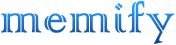
<style>
.page{position:relative;width:176px;height:45px;background:#ffffff}
.page>*{position:absolute;margin:0}
.t1{font:51.4px "ColonnaMT";font-weight:bold}
</style>
<div class="page">
<p class="t1" style="left:1px;top:1px;width:174px;height:43px">memify</p>
</div>
